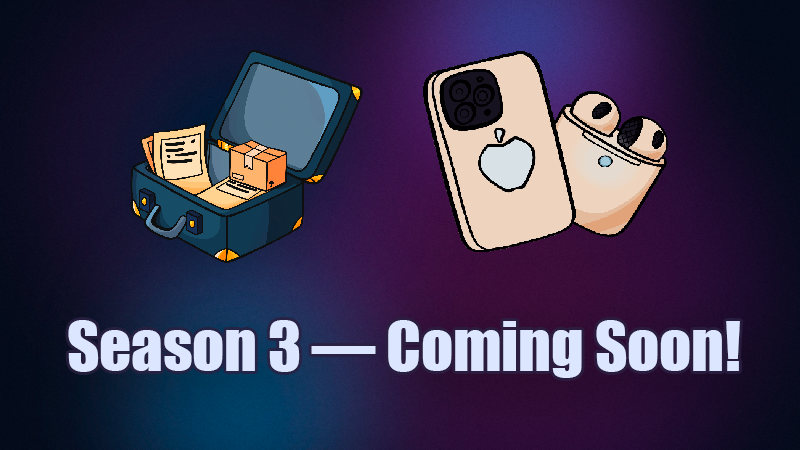
<style>
.page{position:relative;width:800px;height:450px}
.page>*{position:absolute;margin:0}
.t1{font:62.7px "Impact";color:#dde6ff}
</style>
<div class="page">
<p class="t1" style="left:68px;top:320px;width:672px;height:58px">Season 3 — Coming Soon!</p>
</div>
